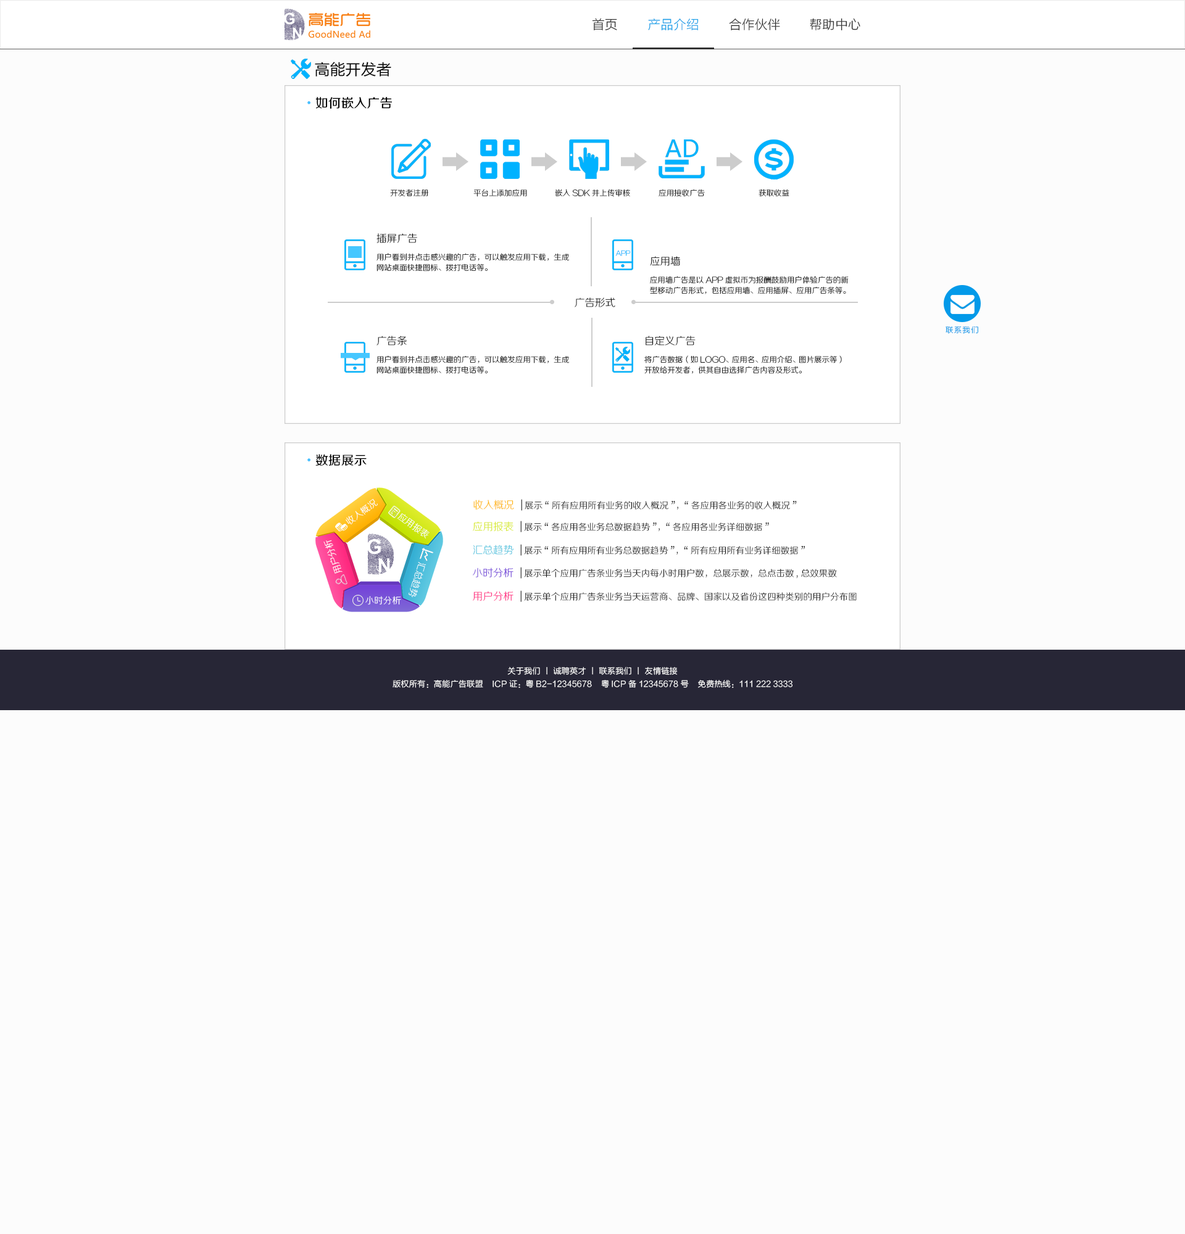
<style>
.page{position:relative;width:1185px;height:1234px;background:#fcfcfc}
.page>*{position:absolute;margin:0}
.t1{font:12.9px "FZLTXHK";color:#333333}
.t2{font:12.9px "FZLTXHK";color:#1ca2e9}
.t3{font:15.4px "FZLTHK--GBK1-0";color:#000000}
.t4{font:12.9px "FZZZHUNHJW--GB1-0";color:#000000}
.t5{font:12.9px "AdobeHeitiStd-Regular";color:#47c0ff}
.t6{font:7.7px "FZZXHJW--GB1-0"}
.t7{font:7.7px "FZZXHJW--GB1-0";color:#010101}
.t8{font:10.3px "FZZXHJW--GB1-0";color:#000000}
.t9{font:7.7px/10.3px "FZZXHJW--GB1-0";color:#000000}
.t10{font:6.4px "FZZXHJW--GB1-0"}
.t11{font:7.7px "FZLTXHK";letter-spacing:0.1em;color:#039ae9}
.t12{font:9px "FZZXHJW--GB1-0";color:#ffffff}
.t13{font:9px/23.1px "FZZXHJW--GB1-0";color:#131313}
.t14{font:12px "FZZXHJW--GB1-0";color:#131313}
.t15{font:10.3px/23.1px "FZZXHJW--GB1-0";color:#131313}
.t16{font:8.2px "FZLTXHK";color:#ffffff}
</style>
<div class="page">
<p class="t1" style="left:592px;top:18px;width:25px;height:13px">首页</p>
<p class="t1" style="left:729px;top:18px;width:51px;height:13px">合作伙伴</p>
<p class="t1" style="left:810px;top:18px;width:50px;height:13px">帮助中心</p>
<p class="t2" style="left:648px;top:19px;width:51px;height:12px">产品介绍</p>
<p class="t3" style="left:315px;top:62px;width:76px;height:15px">高能开发者</p>
<p class="t4" style="left:307px;top:97px;width:85px;height:12px"><span class="t5">•</span>如何嵌入广告</p>
<p class="t6" style="left:390px;top:189px;width:38px;height:8px">开发者注册</p>
<p class="t6" style="left:473px;top:189px;width:54px;height:8px">平台上添加应用</p>
<p class="t7" style="left:555px;top:189px;width:75px;height:8px">嵌入SDK并上传审核</p>
<p class="t6" style="left:658px;top:189px;width:47px;height:8px">应用接收广告</p>
<p class="t7" style="left:758px;top:189px;width:31px;height:8px">获取收益</p>
<p class="t8" style="left:376px;top:233px;width:41px;height:10px">插屏广告</p>
<p class="t9" style="left:376px;top:253px;width:193px;height:19px">用户看到并点击感兴趣的广告，可以触发应用下载，生成<br>网站桌面快捷图标、拨打电话等。</p>
<p class="t10" style="left:615px;top:250px;width:16px;height:6px">APP</p>
<p class="t8" style="left:650px;top:256px;width:31px;height:10px">应用墙</p>
<p class="t9" style="left:650px;top:276px;width:199px;height:18px">应用墙广告是以APP虚拟币为报酬鼓励用户体验广告的新<br>型移动广告形式，包括应用墙、应用插屏、应用广告条等。</p>
<p class="t8" style="left:575px;top:297px;width:40px;height:10px">广告形式</p>
<p class="t11" style="left:945px;top:326px;width:33px;height:8px">联系我们</p>
<p class="t8" style="left:376px;top:336px;width:31px;height:10px">广告条</p>
<p class="t8" style="left:646px;top:336px;width:50px;height:10px">自定义广告</p>
<p class="t9" style="left:376px;top:355px;width:193px;height:19px">用户看到并点击感兴趣的广告，可以触发应用下载，生成<br>网站桌面快捷图标、拨打电话等。</p>
<p class="t9" style="left:644px;top:355px;width:198px;height:19px">将广告数据（如LOGO、 应用名、 应用介绍、 图片展示等）<br>开放给开发者，供其自由选择广告内容及形式。</p>
<p class="t4" style="left:307px;top:454px;width:60px;height:12px"><span class="t5">•</span>数据展示</p>
<p class="t12" style="left:346px;top:499px;width:32px;height:26px;rotate:-35deg">收人概况</p>
<p class="t13" style="left:473px;top:499px;width:384px;height:103px"><span class="t14"> </span><span class="t15">收入概况</span><span class="t15">  |</span>展示“所有应用所有业务的收入概况”，“各应用各业务的收入概况”<br> <span class="t15">应用报表</span><span class="t15">  |</span>展示“各应用各业务总数据趋势”，“各应用各业务详细数据”<br> <span class="t15">汇总趋势</span><span class="t15">  |</span>展示“所有应用所有业务总数据趋势”，“所有应用所有业务详细数据”<br> <span class="t15">小时分析</span><span class="t15">  |</span>展示单个应用广告条业务当天内每小时用户数，总展示数，总点击数, 总效果数<br> <span class="t15">用户分析</span><span class="t15">  |</span>展示单个应用广告条业务当天运营商、品牌、国家以及省份这四种类别的用户分布图</p>
<p class="t12" style="left:397px;top:513px;width:33px;height:26px;rotate:36deg">应用报表</p>
<p class="t12" style="left:323px;top:540px;width:20px;height:34px;rotate:-109deg">用户分析</p>
<p class="t12" style="left:409px;top:562px;width:17px;height:35px;rotate:107deg">汇总趋势</p>
<p class="t12" style="left:365px;top:596px;width:36px;height:9px;rotate:1deg">小时分析</p>
<p class="t16" style="left:507px;top:667px;width:171px;height:8px">关于我们 丨 诚聘英才 丨 联系我们 丨 友情链接</p>
<p class="t16" style="left:393px;top:679px;width:400px;height:9px">版权所有：高能广告联盟    ICP证：粤B2-12345678    粤ICP备12345678号    免费热线：111 222 3333</p>
</div>
